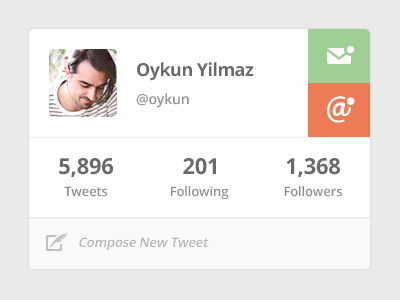
<style>
.page{position:relative;width:400px;height:300px;background:#ffffff}
.page>*{position:absolute;margin:0}
.t1{font:18px "OpenSans-Bold";letter-spacing:-0.03em;color:#6a6a6a}
.t2{font:14px "OpenSans-Semibold";letter-spacing:-0.01em;color:#8f8f8f}
.t3{font:22px "OpenSans-Bold";letter-spacing:-0.01em;color:#6a6a6a}
.t4{font:13px "OpenSans-Semibold";letter-spacing:-0.01em;color:#8f8f8f}
.t5{font:13px "OpenSans-Semibold";letter-spacing:-0.01em;color:#b6b6b6;font-style:italic}
</style>
<div class="page">
<p class="t1" style="left:137px;top:62px;width:117px;height:19px">Oykun Yilmaz</p>
<p class="t2" style="left:136px;top:93px;width:53px;height:15px">@oykun</p>
<p class="t3" style="left:59px;top:158px;width:54px;height:19px">5,896</p>
<p class="t3" style="left:183px;top:158px;width:33px;height:17px">201</p>
<p class="t3" style="left:286px;top:158px;width:54px;height:19px">1,368</p>
<p class="t4" style="left:64px;top:186px;width:44px;height:11px">Tweets</p>
<p class="t4" style="left:171px;top:186px;width:58px;height:13px">Following</p>
<p class="t4" style="left:284px;top:186px;width:58px;height:11px">Followers</p>
<p class="t5" style="left:79px;top:237px;width:130px;height:13px">Compose New Tweet</p>
</div>
